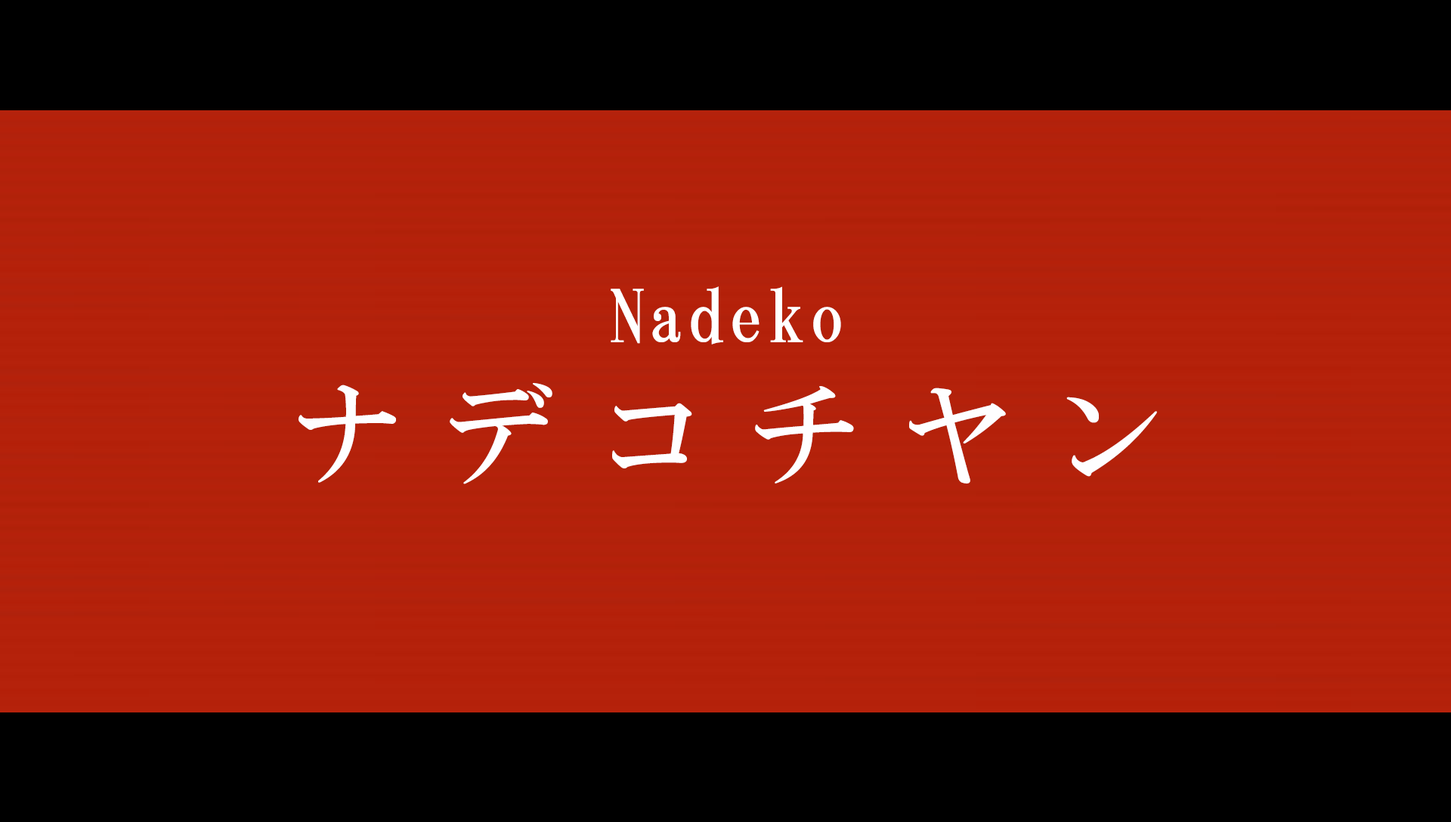
<style>
.page{position:relative;width:1451px;height:822px;background:#000000}
.page>*{position:absolute;margin:0}
.t1{font:72.5px "HGMinchoB";letter-spacing:0.05em;color:#ffffff}
.t2{font:111.1px "HGMinchoB";letter-spacing:0.37em;color:#fefeff}
</style>
<div class="page">
<p class="t1" style="left:610px;top:286px;width:231px;height:59px">Nadeko</p>
<p class="t2" style="left:298px;top:382px;width:859px;height:102px">ナデコチヤン</p>
</div>
